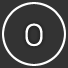
<style>
.page{position:relative;width:68px;height:68px;background:#333333}
.page>*{position:absolute;margin:0}
.t1{font:30px "NanumSquareR";color:#ffffff}
</style>
<div class="page">
<p class="t1" style="left:25px;top:23px;width:18px;height:24px">O</p>
</div>
